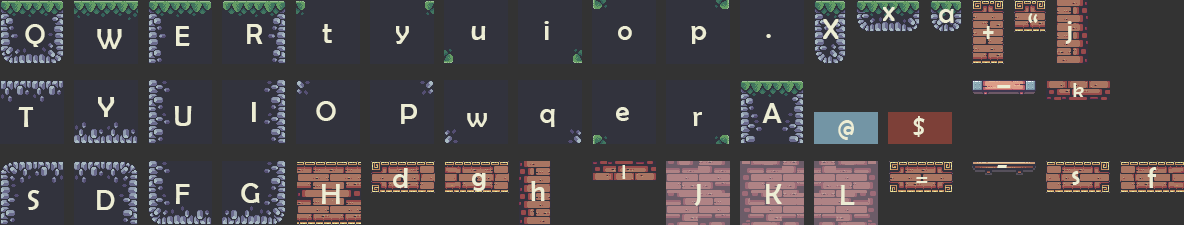
<style>
.page{position:relative;width:1184px;height:225px;background:#333333}
.page>*{position:absolute;margin:0}
.t1{font:29px "BerlinSansFB-Reg";color:#ededd4}
.t2{font:21.3px "BerlinSansFB-Reg";color:#ededd4}
</style>
<div class="page">
<p class="t1" style="left:883px;top:7px;width:12px;height:14px">x</p>
<p class="t1" style="left:939px;top:9px;width:15px;height:14px">a</p>
<p class="t1" style="left:1028px;top:13px;width:10px;height:10px">“</p>
<p class="t1" style="left:25px;top:24px;width:20px;height:23px">Q</p>
<p class="t1" style="left:97px;top:29px;width:25px;height:20px">W</p>
<p class="t1" style="left:176px;top:26px;width:14px;height:20px">E</p>
<p class="t1" style="left:247px;top:24px;width:16px;height:20px">R</p>
<p class="t1" style="left:322px;top:24px;width:10px;height:19px">t</p>
<p class="t1" style="left:396px;top:26px;width:13px;height:18px">y</p>
<p class="t1" style="left:471px;top:26px;width:15px;height:14px">u</p>
<p class="t1" style="left:544px;top:21px;width:5px;height:19px">i</p>
<p class="t1" style="left:618px;top:26px;width:14px;height:14px">o</p>
<p class="t1" style="left:691px;top:26px;width:16px;height:18px">p</p>
<p class="t1" style="left:823px;top:19px;width:16px;height:20px">X</p>
<p class="t1" style="left:983px;top:26px;width:11px;height:13px">+</p>
<p class="t1" style="left:1065px;top:21px;width:7px;height:23px">j</p>
<p class="t1" style="left:766px;top:34px;width:5px;height:4px">.</p>
<p class="t1" style="left:997px;top:85px;width:14px;height:3px">_</p>
<p class="t2" style="left:1073px;top:83px;width:11px;height:14px">k</p>
<p class="t1" style="left:98px;top:97px;width:17px;height:20px">Y</p>
<p class="t1" style="left:252px;top:102px;width:4px;height:20px">I</p>
<p class="t1" style="left:316px;top:101px;width:20px;height:20px">O</p>
<p class="t1" style="left:18px;top:107px;width:16px;height:20px">T</p>
<p class="t1" style="left:174px;top:106px;width:18px;height:20px">U</p>
<p class="t1" style="left:401px;top:104px;width:16px;height:20px">P</p>
<p class="t1" style="left:467px;top:113px;width:20px;height:14px">w</p>
<p class="t1" style="left:540px;top:109px;width:15px;height:18px">q</p>
<p class="t1" style="left:616px;top:107px;width:13px;height:14px">e</p>
<p class="t1" style="left:693px;top:112px;width:9px;height:14px">r</p>
<p class="t1" style="left:762px;top:103px;width:20px;height:20px">A</p>
<p class="t1" style="left:838px;top:120px;width:16px;height:20px">@</p>
<p class="t1" style="left:913px;top:116px;width:12px;height:21px">$</p>
<p class="t1" style="left:393px;top:168px;width:15px;height:20px">d</p>
<p class="t1" style="left:472px;top:173px;width:14px;height:18px">g</p>
<p class="t2" style="left:622px;top:165px;width:4px;height:14px">l</p>
<p class="t1" style="left:997px;top:165px;width:10px;height:3px">-</p>
<p class="t1" style="left:1072px;top:171px;width:8px;height:14px">s</p>
<p class="t1" style="left:1147px;top:167px;width:10px;height:21px">f</p>
<p class="t1" style="left:176px;top:184px;width:14px;height:20px">F</p>
<p class="t1" style="left:241px;top:183px;width:19px;height:20px">G</p>
<p class="t1" style="left:322px;top:184px;width:18px;height:20px">H</p>
<p class="t1" style="left:531px;top:181px;width:14px;height:20px">h</p>
<p class="t1" style="left:694px;top:184px;width:7px;height:22px">J</p>
<p class="t1" style="left:766px;top:184px;width:16px;height:20px">K</p>
<p class="t1" style="left:841px;top:185px;width:14px;height:20px">L</p>
<p class="t1" style="left:916px;top:177px;width:12px;height:6px">=</p>
<p class="t1" style="left:28px;top:190px;width:12px;height:20px">S</p>
<p class="t1" style="left:97px;top:190px;width:18px;height:20px">D</p>
</div>
